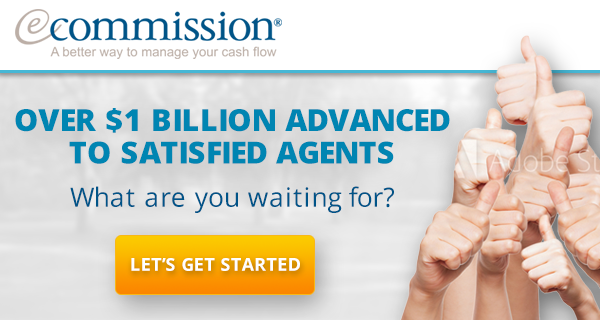
<style>
.page{position:relative;width:600px;height:320px}
.page>*{position:absolute;margin:0}
.t1{font:30.5px/32.5px "OpenSans-Extrabold";color:#0085b2;text-transform:uppercase}
.t2{font:26.5px "OpenSans";color:#005488}
.t3{font:17.7px "OpenSans-Bold";color:#ffffff;text-transform:uppercase}
</style>
<div class="page">
<p class="t1" style="left:15px;top:108px;width:435px;height:56px;text-align:center">Over $1 Billion Advanced<br>to Satisfied Agents</p>
<p class="t2" style="left:70px;top:186px;width:324px;height:27px">What are you waiting for?</p>
<p class="t3" style="left:131px;top:258px;width:169px;height:13px">LET’S GET STARTED</p>
</div>
